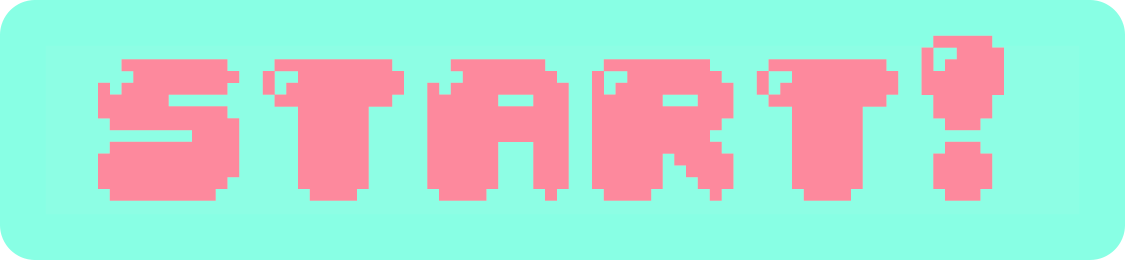
<style>
.page{position:relative;width:1125px;height:260px;background:#88ffe4}
.page>*{position:absolute;margin:0}
.t1{font:200px "04b30";color:#fd899d}
</style>
<div class="page">
<p class="t1" style="left:98px;top:35px;width:906px;height:166px">start!</p>
</div>
